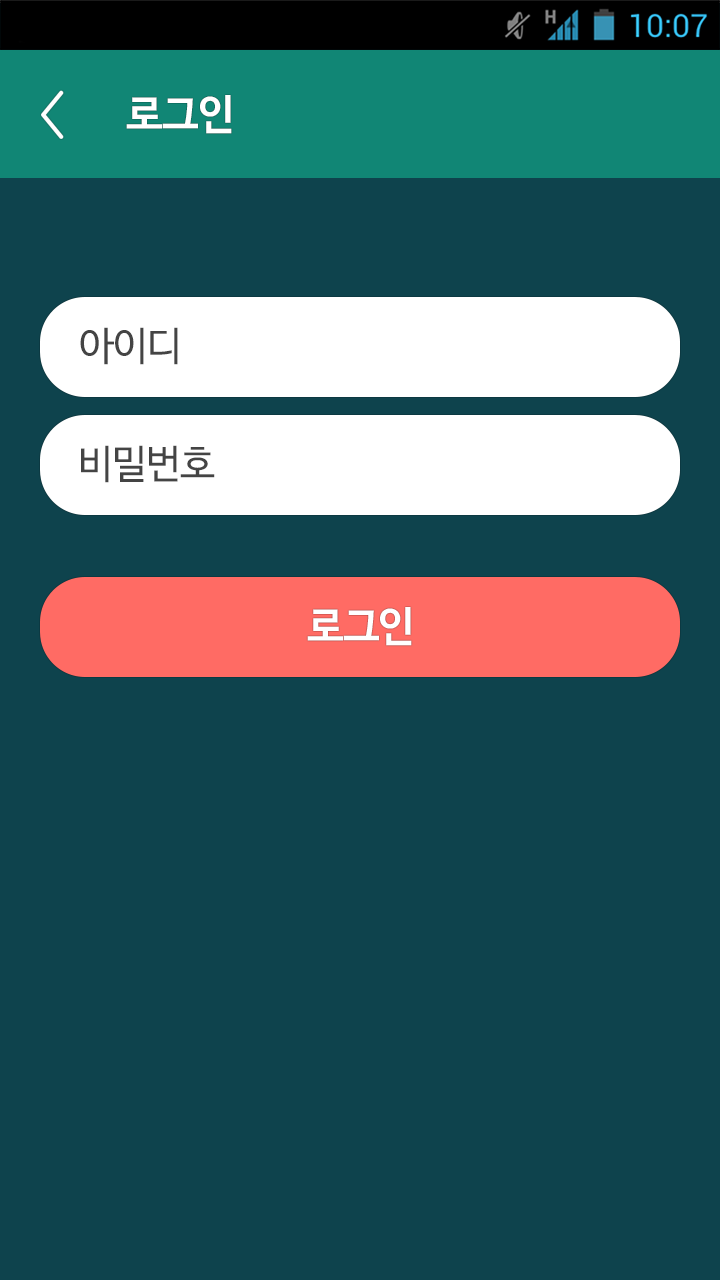
<style>
.page{position:relative;width:720px;height:1280px;background:#0e434d}
.page>*{position:absolute;margin:0}
.t1{font:42px "NanumBarunGothicOTFBold";letter-spacing:-0.02em;color:#ffffff}
.t2{font:40px "NanumBarunGothicOTF";letter-spacing:-0.02em;color:#444444}
.t3{font:42px "NanumBarunGothicOTFBold";letter-spacing:-0.03em;color:#ffffff}
</style>
<div class="page">
<p class="t1" style="left:126px;top:95px;width:106px;height:39px">로그인</p>
<p class="t2" style="left:80px;top:327px;width:98px;height:38px">아이디</p>
<p class="t2" style="left:81px;top:445px;width:134px;height:38px">비밀번호</p>
<p class="t3" style="left:307px;top:607px;width:105px;height:39px">로그인</p>
</div>
